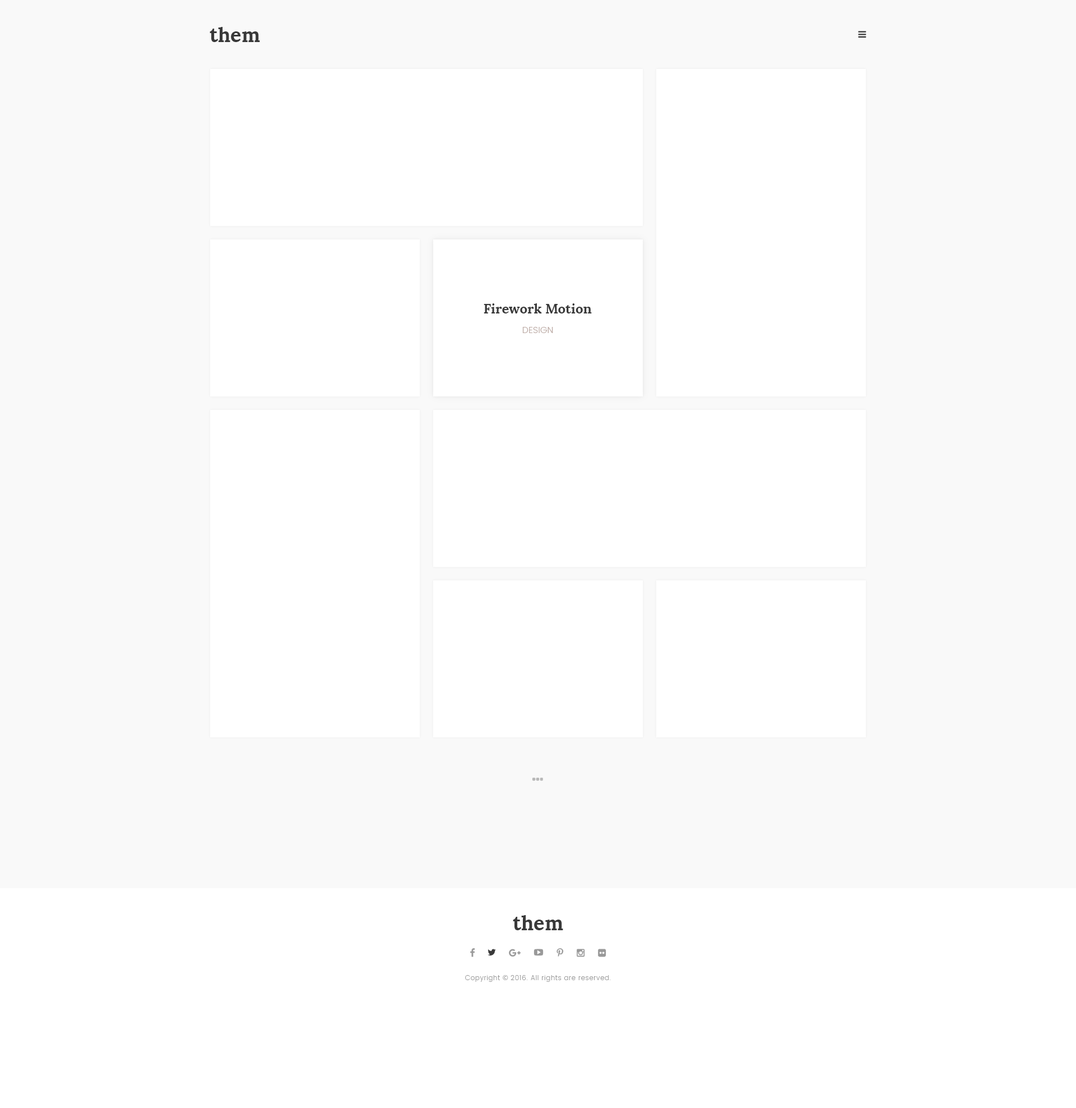
<style>
.page{position:relative;width:1076px;height:1108px;background:#ffffff}
.page>*{position:absolute;margin:0}
.t1{font:20.2px "Lora-Bold";color:#393939}
.t2{font:13.5px "Lora-Bold";color:#393939}
.t3{font:9px "Poppins-Light";letter-spacing:0.01em;color:#bcaaa4;text-transform:uppercase}
.t4{font:6.7px "Poppins-Light";letter-spacing:0.05em;color:#999999}
.t5{font:6.7px "OpenSans";letter-spacing:0.05em;color:#999999}
</style>
<div class="page">
<p class="t1" style="left:210px;top:27px;width:50px;height:15px">them</p>
<p class="t2" style="left:484px;top:303px;width:108px;height:10px">Firework Motion</p>
<p class="t3" style="left:523px;top:327px;width:30px;height:6px">Design</p>
<p class="t1" style="left:513px;top:915px;width:50px;height:15px">them</p>
<p class="t4" style="left:465px;top:975px;width:146px;height:7px">Copyright <span class="t5">© </span>2016. All rights are reserved.</p>
</div>
